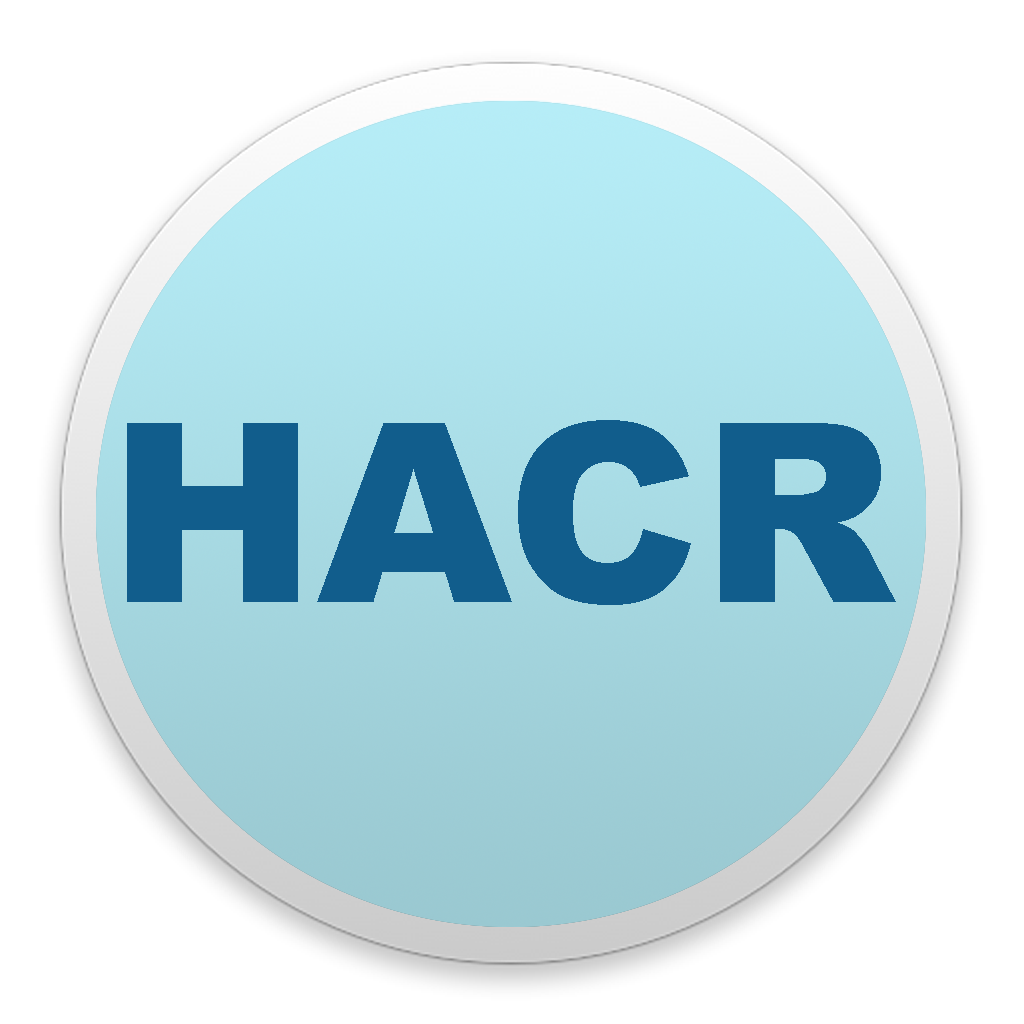
<style>
.page{position:relative;width:1024px;height:1024px;background:#ffffff}
.page>*{position:absolute;margin:0}
.t1{font:250px "Arial-Black";color:#115d8c}
</style>
<div class="page">
<p class="t1" style="left:127px;top:420px;width:769px;height:185px">HACR</p>
</div>
